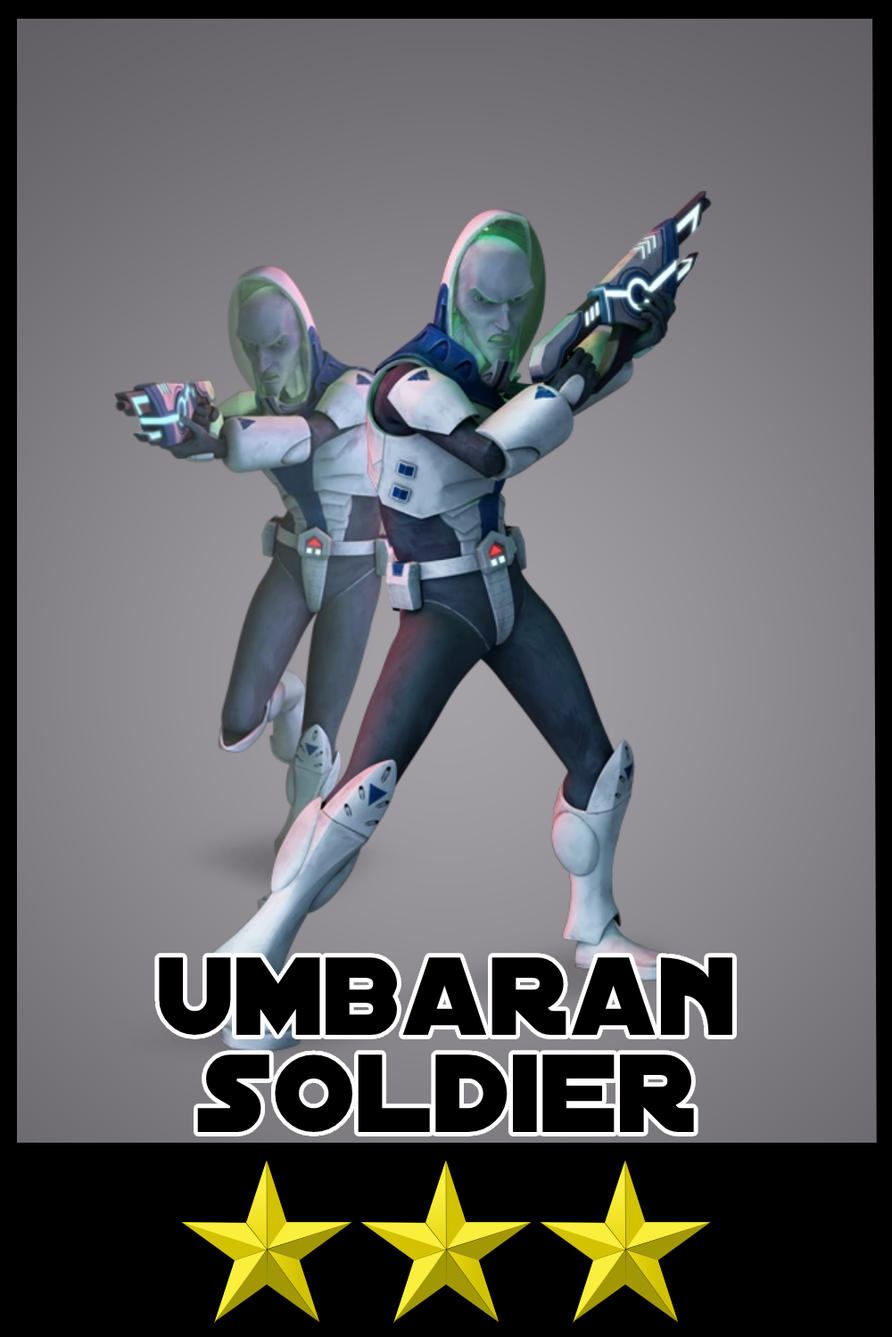
<style>
.page{position:relative;width:892px;height:1337px}
.page>*{position:absolute;margin:0}
.t1{font:118.9px/97.1px "DistantGalaxy";color:#000000}
</style>
<div class="page">
<p class="t1" style="left:159px;top:958px;width:573px;height:174px;text-align:center">umbaran<br>soldier</p>
</div>
